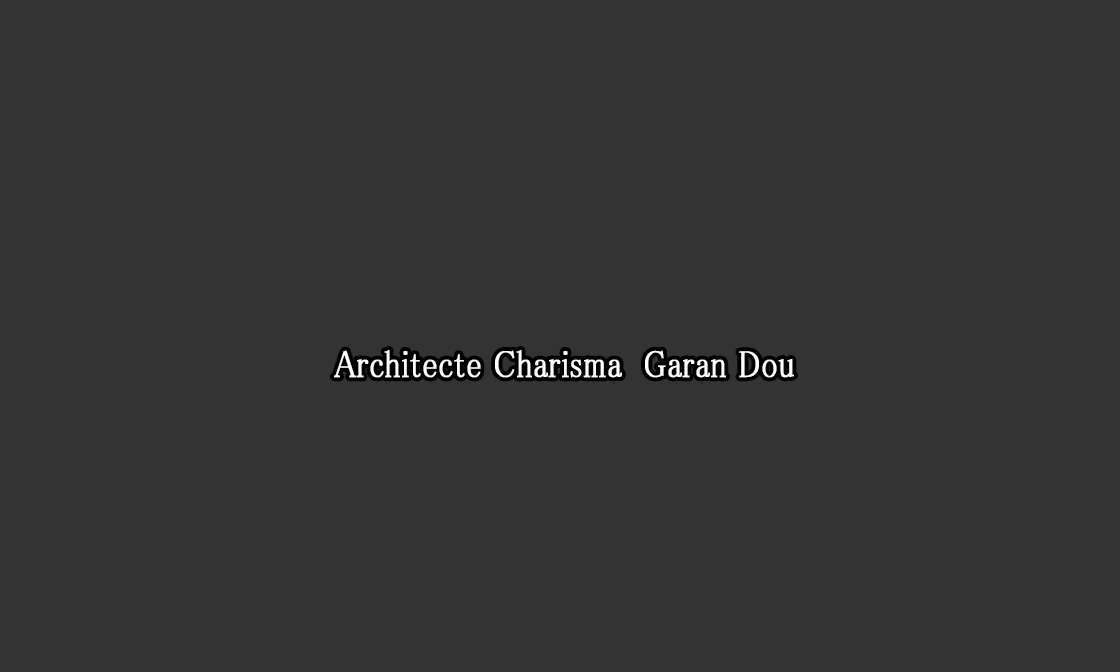
<style>
.page{position:relative;width:1120px;height:672px;background:#333333}
.page>*{position:absolute;margin:0}
.t1{font:38px "MS-PMincho";color:#ffffff;font-weight:bold;scale:0.84 1}
</style>
<div class="page">
<p class="t1" style="left:334px;top:350px;width:460px;height:28px">Architecte Charisma  Garan Dou</p>
</div>
